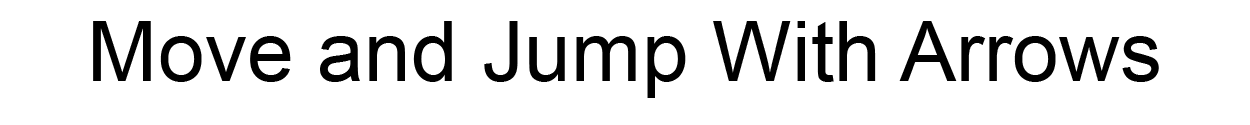
<style>
.page{position:relative;width:1250px;height:125px;background:#ffffff}
.page>*{position:absolute;margin:0}
.t1{font:84.5px "ArialMT";color:#000000}
</style>
<div class="page">
<p class="t1" style="left:93px;top:21px;width:1066px;height:77px">Move and Jump With Arrows</p>
</div>
